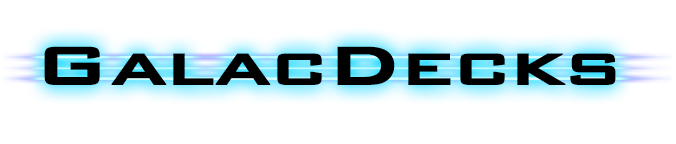
<style>
.page{position:relative;width:676px;height:144px;background:#ffffff}
.page>*{position:absolute;margin:0}
.t1{font:72px "BankGothicBT-Medium";letter-spacing:-0.02em;color:#000000;font-weight:bold;scale:1.2 1}
</style>
<div class="page">
<p class="t1" style="left:44px;top:46px;width:572px;height:39px">GalacDecks</p>
</div>
